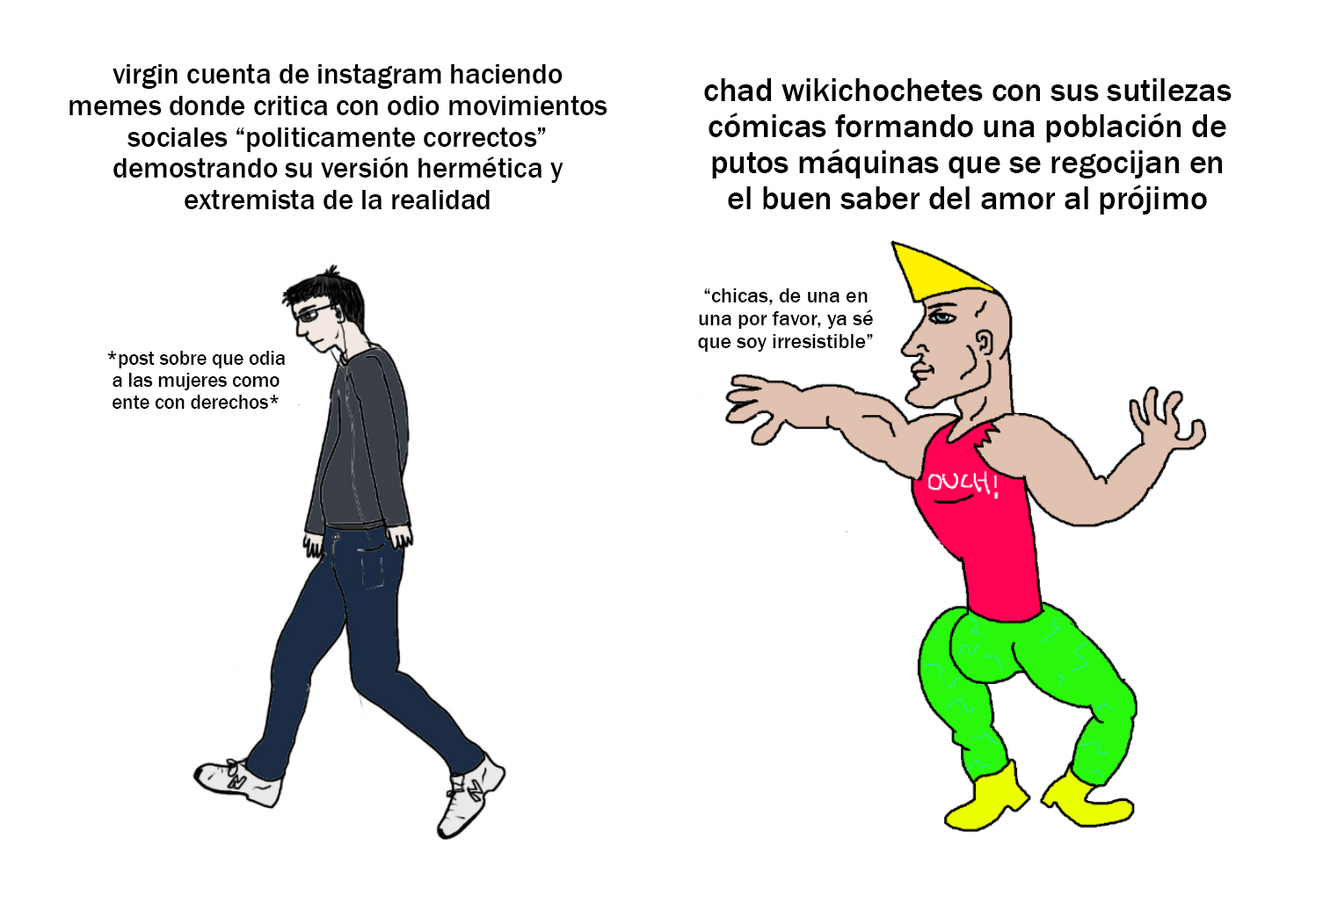
<style>
.page{position:relative;width:1323px;height:902px;background:#ffffff}
.page>*{position:absolute;margin:0}
.t1{font:28.8px "FranklinGothic-Medium";color:#000000}
.t2{font:33.2px "FranklinGothic-Medium";color:#000000}
.t3{font:21.1px "FranklinGothic-Medium";color:#000000}
.t4{font:19.9px "FranklinGothic-Medium";color:#000000}
</style>
<div class="page">
<p class="t1" style="left:69px;top:64px;width:538px;height:145px;text-align:center">virgin cuenta de instagram haciendo<br>memes donde critica con odio movimientos<br>sociales “politicamente correctos”<br>demostrando su versión hermética y<br>extremista de la realidad</p>
<p class="t2" style="left:704px;top:78px;width:527px;height:136px;text-align:center">chad wikichochetes con sus sutilezas<br>cómicas formando una población de<br>putos máquinas que se regocijan en<br>el buen saber del amor al prójimo</p>
<p class="t3" style="left:698px;top:288px;width:175px;height:64px;text-align:center">“chicas, de una en<br>una por favor, ya sé<br>que soy irresistible”</p>
<p class="t4" style="left:107px;top:351px;width:178px;height:58px;text-align:center">*post sobre que odia<br>a las mujeres como<br>ente con derechos*</p>
</div>
